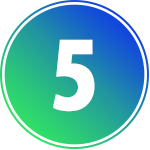
<style>
.page{position:relative;width:150px;height:150px;background:#ffffff}
.page>*{position:absolute;margin:0}
.t1{font:91.3px "KozGoPr6N-Heavy";color:#ffffff;text-transform:uppercase;font-weight:bold;scale:0.89 1}
</style>
<div class="page">
<p class="t1" style="left:53px;top:39px;width:42px;height:73px">5</p>
</div>
